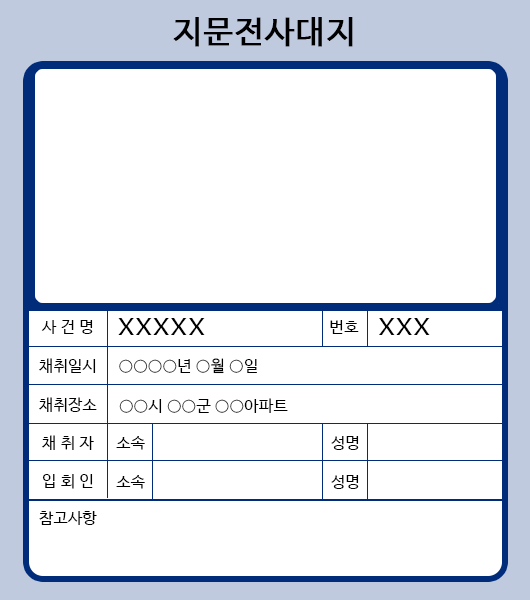
<style>
.page{position:relative;width:530px;height:600px;background:#ffffff}
.page>*{position:absolute;margin:0}
.t1{font:32px "NanumBarunGothic";letter-spacing:0.04em;color:#000000;font-weight:bold}
.t2{font:31px "NanumBarunGothic";letter-spacing:0.04em;color:#000000}
.t3{font:15.6px "NanumBarunGothic";letter-spacing:0.04em;color:#000000}
.t4{font:15.7px "NanumBarunGothic";letter-spacing:0.04em;color:#000000}
</style>
<div class="page">
<p class="t1" style="left:173px;top:17px;width:180px;height:30px">지문전사대지</p>
<p class="t2" style="left:118px;top:318px;width:87px;height:17px">xxxxx</p>
<p class="t2" style="left:379px;top:318px;width:51px;height:17px">xxx</p>
<p class="t3" style="left:41px;top:320px;width:52px;height:14px">사 건 명</p>
<p class="t3" style="left:330px;top:320px;width:29px;height:14px">번호</p>
<p class="t3" style="left:39px;top:358px;width:57px;height:15px">채취일시</p>
<p class="t4" style="left:119px;top:358px;width:138px;height:16px">○○○○년 ○월 ○일</p>
<p class="t3" style="left:39px;top:397px;width:58px;height:15px">채취장소</p>
<p class="t4" style="left:119px;top:398px;width:169px;height:15px">○○시 ○○군 ○○아파트</p>
<p class="t3" style="left:42px;top:435px;width:52px;height:15px">채 취 자</p>
<p class="t3" style="left:116px;top:436px;width:29px;height:14px">소속</p>
<p class="t3" style="left:331px;top:436px;width:28px;height:14px">성명</p>
<p class="t3" style="left:42px;top:474px;width:51px;height:15px">입 회 인</p>
<p class="t3" style="left:116px;top:475px;width:29px;height:14px">소속</p>
<p class="t3" style="left:331px;top:475px;width:28px;height:14px">성명</p>
<p class="t3" style="left:39px;top:511px;width:58px;height:14px">참고사항</p>
</div>
